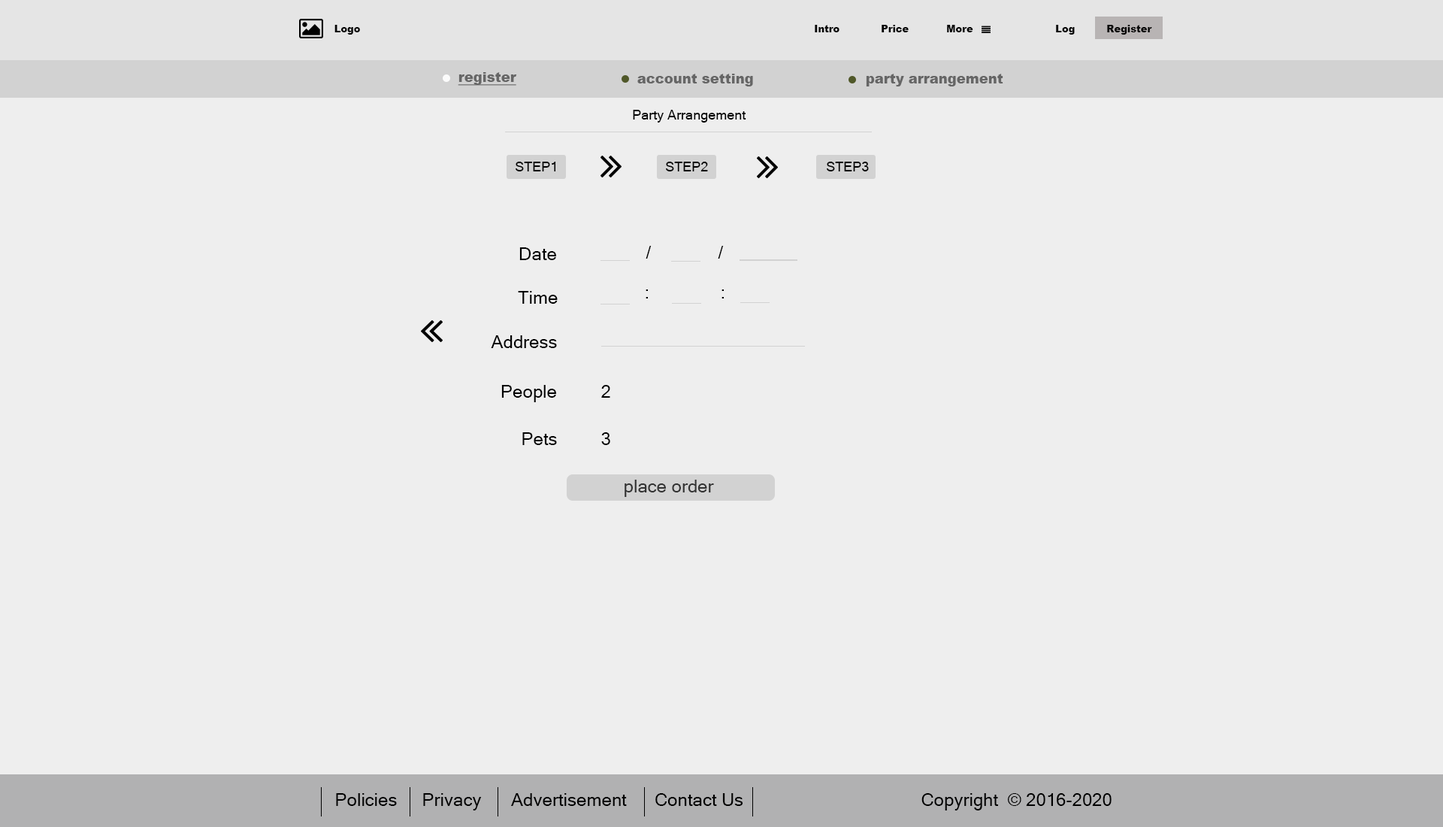
<style>
.page{position:relative;width:1443px;height:827px;background:#eeeeee}
.page>*{position:absolute;margin:0}
.t1{font:9.8px "Arial-Black";color:#050505}
.t2{font:13.5px "Arial-Black";color:#666666;text-decoration:underline}
.t3{font:13.5px "Arial-Black";color:#666666}
.t4{font:13.5px "MicrosoftSansSerif";color:#000000}
.t5{font:18px "MicrosoftSansSerif";color:#000000}
.t6{font:18px "MicrosoftSansSerif";color:#333333}
</style>
<div class="page">
<p class="t1" style="left:334px;top:25px;width:26px;height:10px">Logo</p>
<p class="t1" style="left:815px;top:25px;width:24px;height:7px">Intro</p>
<p class="t1" style="left:881px;top:25px;width:27px;height:7px">Price</p>
<p class="t1" style="left:947px;top:25px;width:26px;height:7px">More</p>
<p class="t1" style="left:1056px;top:25px;width:18px;height:10px">Log</p>
<p class="t1" style="left:1107px;top:25px;width:45px;height:10px">Register</p>
<p class="t2" style="left:458px;top:72px;width:59px;height:14px">register</p>
<p class="t3" style="left:637px;top:74px;width:116px;height:12px">account setting</p>
<p class="t3" style="left:866px;top:74px;width:137px;height:12px">party arrangement</p>
<p class="t4" style="left:633px;top:110px;width:113px;height:12px">Party Arrangement</p>
<p class="t4" style="left:515px;top:162px;width:41px;height:9px">STEP1</p>
<p class="t4" style="left:666px;top:162px;width:42px;height:9px">STEP2</p>
<p class="t4" style="left:827px;top:162px;width:42px;height:9px">STEP3</p>
<p class="t5" style="left:645px;top:246px;width:6px;height:12px">/</p>
<p class="t5" style="left:718px;top:246px;width:6px;height:12px">/</p>
<p class="t5" style="left:519px;top:247px;width:37px;height:13px">Date</p>
<p class="t5" style="left:518px;top:291px;width:40px;height:13px">Time</p>
<p class="t5" style="left:645px;top:289px;width:3px;height:9px">:</p>
<p class="t5" style="left:721px;top:289px;width:3px;height:9px">:</p>
<p class="t5" style="left:491px;top:335px;width:66px;height:13px">Address</p>
<p class="t5" style="left:501px;top:385px;width:55px;height:17px">People</p>
<p class="t5" style="left:601px;top:385px;width:9px;height:12px">2</p>
<p class="t5" style="left:522px;top:432px;width:35px;height:13px">Pets</p>
<p class="t5" style="left:601px;top:432px;width:9px;height:13px">3</p>
<p class="t6" style="left:624px;top:479px;width:90px;height:18px">place order</p>
<p class="t5" style="left:336px;top:793px;width:61px;height:12px">Policies</p>
<p class="t5" style="left:423px;top:793px;width:59px;height:17px">Privacy</p>
<p class="t5" style="left:511px;top:793px;width:116px;height:12px">Advertisement</p>
<p class="t5" style="left:655px;top:793px;width:88px;height:12px">Contact Us</p>
<p class="t5" style="left:921px;top:793px;width:190px;height:17px">Copyright  © 2016-2020</p>
</div>
